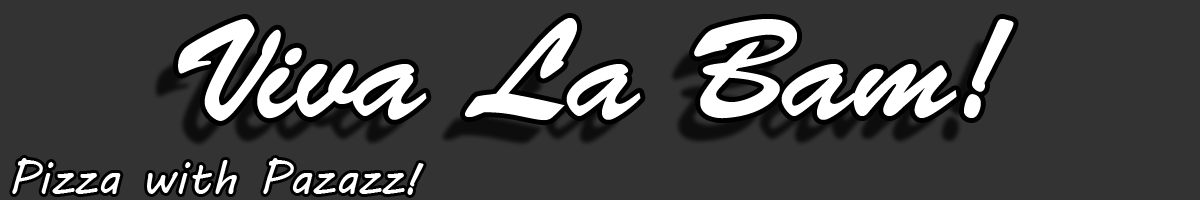
<style>
.page{position:relative;width:1200px;height:200px;background:#333333}
.page>*{position:absolute;margin:0}
.t1{font:140px "BrushScriptStd";color:#ffffff}
.t2{font:46px "MVBoli";color:#ffffff}
.t3{font:46px "BrushScriptStd";color:#ffffff}
</style>
<div class="page">
<p class="t1" style="left:178px;top:18px;width:836px;height:103px">Viva La Bam!</p>
<p class="t2" style="left:12px;top:158px;width:412px;height:37px">Pizza with Pazazz<span class="t3">!</span></p>
</div>
